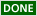
<style>
.page{position:relative;width:37px;height:16px;background:#006600}
.page>*{position:absolute;margin:0}
.t1{font:11px "Frutiger-Bold";color:#ffffff}
</style>
<div class="page">
<p class="t1" style="left:4px;top:4px;width:29px;height:9px">DONE</p>
</div>
